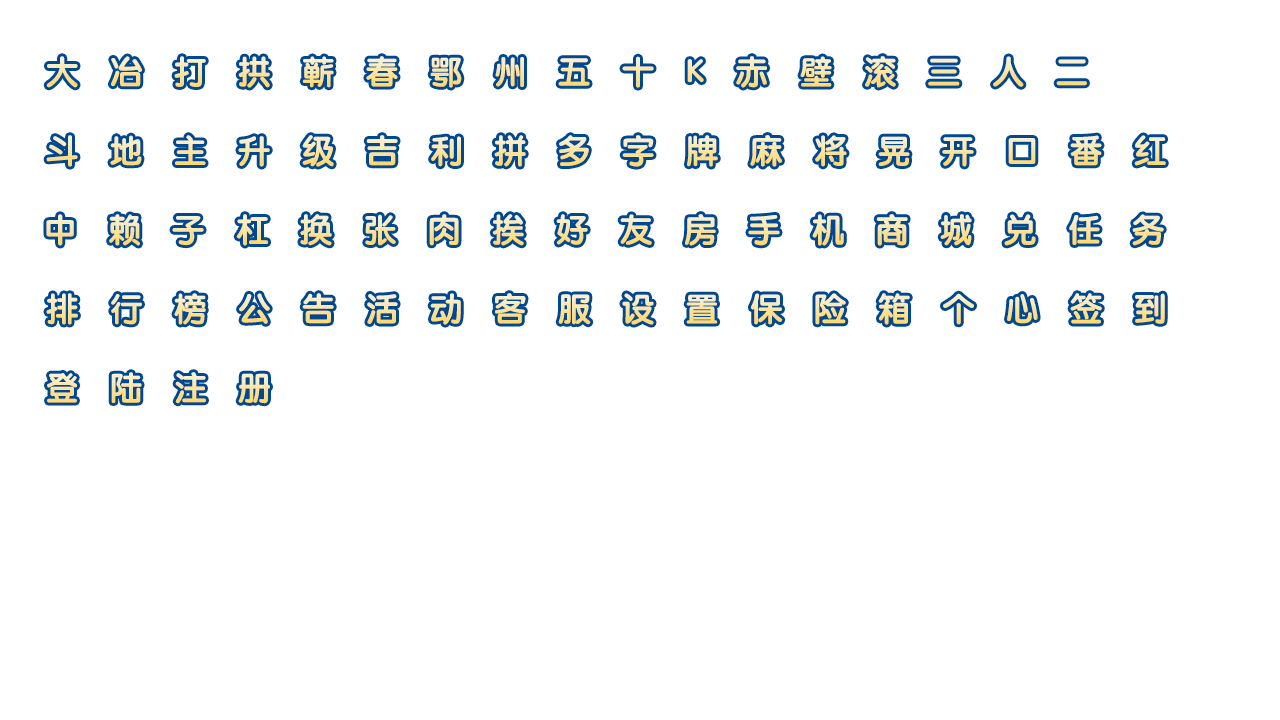
<style>
.page{position:relative;width:1280px;height:720px;background:#ffffff}
.page>*{position:absolute;margin:0}
.t1{font:32px "STYuanti-SC-Bold";letter-spacing:1em}
</style>
<div class="page">
<p class="t1" style="left:46px;top:56px;width:1041px;height:32px">大冶打拱蕲春鄂州五十K赤壁滚三人二</p>
<p class="t1" style="left:46px;top:135px;width:1120px;height:32px">斗地主升级吉利拼多字牌麻将晃开口番红</p>
<p class="t1" style="left:46px;top:214px;width:1118px;height:32px">中赖子杠换张肉挨好友房手机商城兑任务</p>
<p class="t1" style="left:46px;top:293px;width:1119px;height:32px">排行榜公告活动客服设置保险箱个心签到</p>
<p class="t1" style="left:47px;top:372px;width:223px;height:32px">登陆注册</p>
</div>
